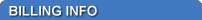
<style>
.page{position:relative;width:202px;height:20px;background:#4379c1}
.page>*{position:absolute;margin:0}
.t1{font:13.3px "Arial-BoldMT";color:#ffffff}
</style>
<div class="page">
<p class="t1" style="left:9px;top:5px;width:88px;height:11px">BILLING INFO</p>
</div>
